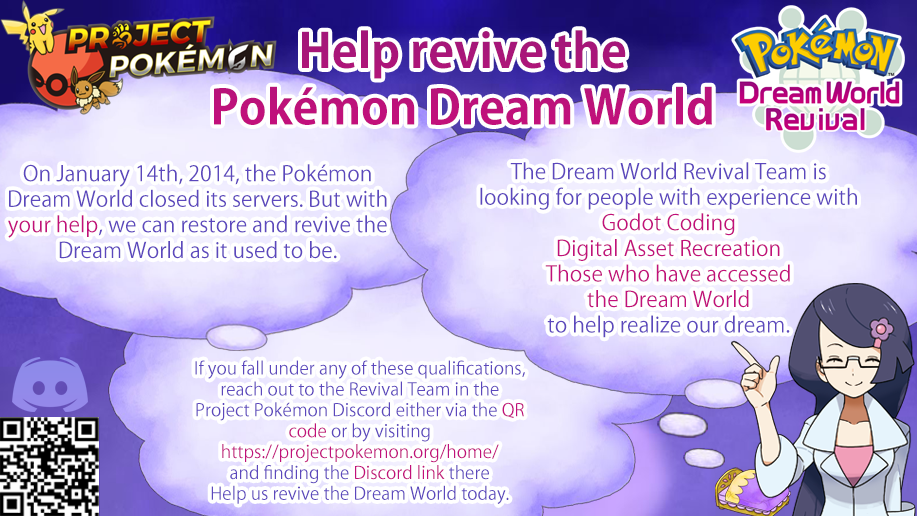
<style>
.page{position:relative;width:917px;height:516px}
.page>*{position:absolute;margin:0}
.t1{font:47px "KozGoPr6N-Bold";color:#bd0378}
.t2{font:21.3px "KozGoPr6N-Regular";color:#5c48bd}
.t3{font:21.3px "KozGoPr6N-Regular";color:#c2107b}
.t4{font:17.4px "KozGoPr6N-Regular";color:#5c48bd}
.t5{font:17.4px "KozGoPr6N-Regular";color:#c2107b}
.t6{font:17.4px "KozGoPr6N-Regular";color:#c1107b}
</style>
<div class="page">
<p class="t1" style="left:214px;top:30px;width:498px;height:95px;text-align:center">Help revive the <br>Pokémon Dream World</p>
<p class="t2" style="left:8px;top:164px;width:379px;height:95px;text-align:center">On January 14th, 2014, the Pokémon <br>Dream World closed its servers. But with <br><span class="t3">your help</span>, we can restore and revive the <br>Dream World as it used to be.</p>
<p class="t3" style="left:480px;top:162px;width:377px;height:176px;text-align:center"><span class="t2">The Dream World Revival Team is<br>looking for people with experience with<br></span>Godot Coding<br>Digital Asset Recreation<br>Those who have accessed <br>the Dream World<br><span class="t2">to help realize our dream.</span></p>
<p class="t4" style="left:195px;top:360px;width:330px;height:144px;text-align:center">If you fall under any of these qualifications, <br>reach out to the Revival Team in the <br>Project Pokémon Discord either via the <span class="t5">QR <br>code </span>or by visiting <br><span class="t6">https://projectpokemon.org/home/<br></span>and finding the <span class="t5">Discord link</span> there<br>Help us revive the Dream World today.</p>
</div>
